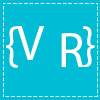
<style>
.page{position:relative;width:100px;height:100px;background:#00bcd4}
.page>*{position:absolute;margin:0}
.t1{font:49px "MyriadHebrew-Regular";color:#fdfbfb}
</style>
<div class="page">
<p class="t1" style="left:6px;top:26px;width:89px;height:42px">{      }</p>
<p class="t1" style="left:17px;top:26px;width:28px;height:34px">V</p>
<p class="t1" style="left:61px;top:33px;width:23px;height:34px">R</p>
</div>
